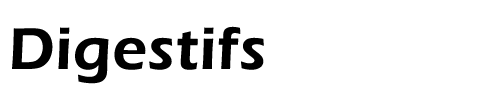
<style>
.page{position:relative;width:500px;height:100px;background:#ffffff}
.page>*{position:absolute;margin:0}
.t1{font:60px "ErasITC-Demi";color:#000000;font-weight:bold}
</style>
<div class="page">
<p class="t1" style="left:12px;top:26px;width:252px;height:58px">Digestifs</p>
</div>
